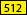
<style>
.page{position:relative;width:27px;height:15px;background:#fff200}
.page>*{position:absolute;margin:0}
.t1{font:12px "MyriadPro-Regular";color:#000000}
</style>
<div class="page">
<p class="t1" style="left:4px;top:4px;width:18px;height:8px">512</p>
</div>
